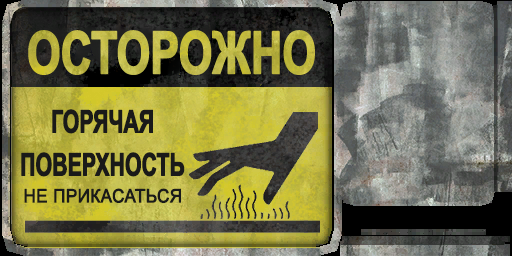
<style>
.page{position:relative;width:512px;height:256px}
.page>*{position:absolute;margin:0}
.t1{font:31.3px/43px "Arial-BoldMT";letter-spacing:-0.02em;color:#1a1a19;font-weight:bold;scale:0.68 1}
.t2{font:18.5px "ArialMT";color:#1a1a19;font-weight:bold;scale:0.92 1}
</style>
<div class="page">
<p class="t1" style="left:21px;top:109px;width:164px;height:68px;text-align:center">ГОРЯЧАЯ<br>ПОВЕРХНОСТЬ</p>
<p class="t2" style="left:24px;top:188px;width:157px;height:15px">НЕ ПРИКАСАТЬСЯ</p>
</div>
